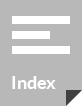
<style>
.page{position:relative;width:82px;height:106px;background:#b8b8b8}
.page>*{position:absolute;margin:0}
.t1{font:18px "Lato-Bold";color:#ffffff}
</style>
<div class="page">
<p class="t1" style="left:12px;top:76px;width:44px;height:13px">Index</p>
</div>
